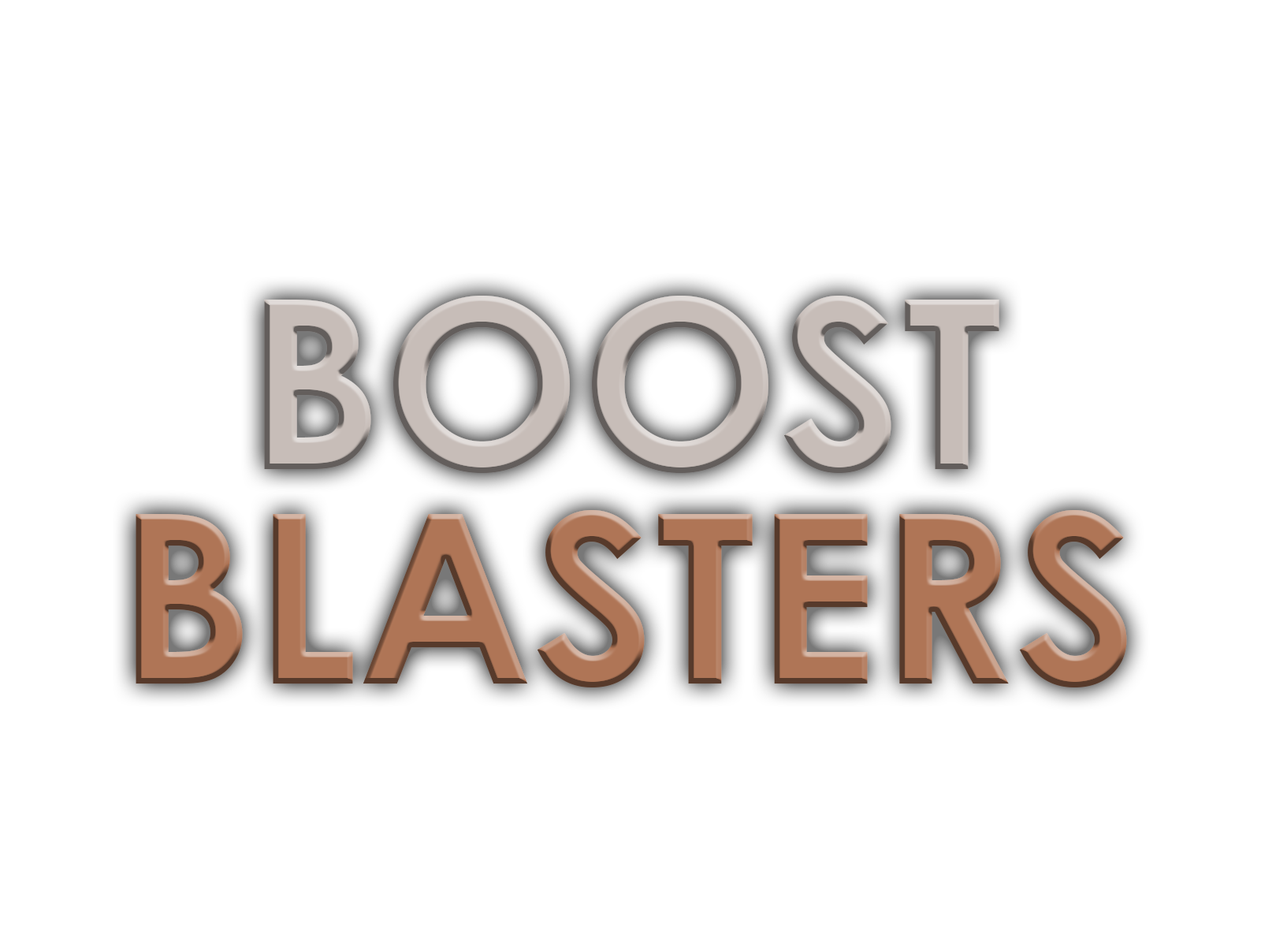
<style>
.page{position:relative;width:1261px;height:946px;background:#ffffff}
.page>*{position:absolute;margin:0}
.t1{font:236.4px "CenturyGothic-Bold";color:#c7bdb8}
.t2{font:236.4px "CenturyGothic-Bold";color:#af7556}
</style>
<div class="page">
<p class="t1" style="left:264px;top:296px;width:735px;height:177px">BOOST</p>
<p class="t2" style="left:136px;top:510px;width:991px;height:177px">BLASTERS</p>
</div>
